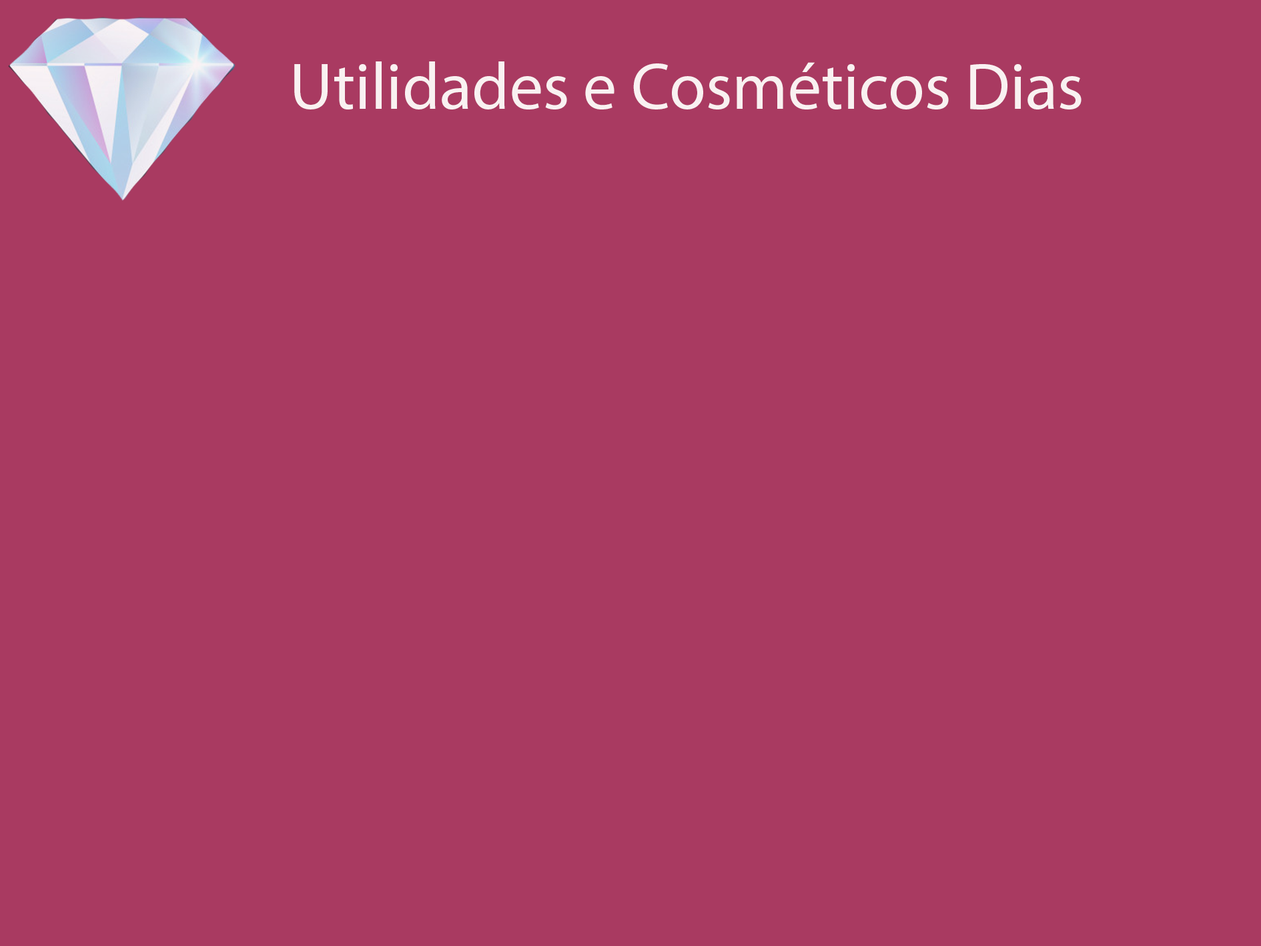
<style>
.page{position:relative;width:1261px;height:946px;background:#a93a61}
.page>*{position:absolute;margin:0}
.t1{font:66.7px "MyriadPro-Regular";color:#f9f1f1}
</style>
<div class="page">
<p class="t1" style="left:294px;top:61px;width:788px;height:48px">Utilidades e Cosméticos Dias</p>
</div>
